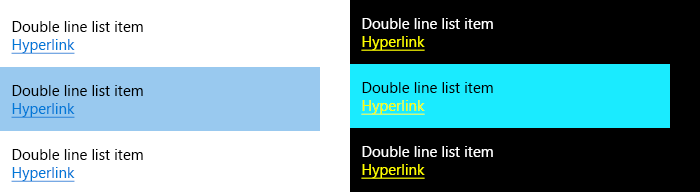
<style>
.page{position:relative;width:700px;height:192px;background:#000000}
.page>*{position:absolute;margin:0}
.t1{font:15px "SegoeUI";color:#000000}
.t2{font:15px "SegoeUI";color:#0078d7;text-decoration:underline}
.t3{font:15px "SegoeUI";color:#ffffff}
.t4{font:15px "SegoeUI";color:#ffff00;text-decoration:underline}
.t5{font:15px "SegoeUI";color:#010101}
</style>
<div class="page">
<p class="t1" style="left:11px;top:21px;width:132px;height:33px">Double line list item<br><span class="t2">Hyperlink</span></p>
<p class="t3" style="left:361px;top:18px;width:132px;height:33px">Double line list item<br><span class="t4">Hyperlink</span></p>
<p class="t1" style="left:11px;top:85px;width:132px;height:33px">Double line list item<br><span class="t2">Hyperlink</span></p>
<p class="t5" style="left:361px;top:82px;width:132px;height:33px">Double line list item<br><span class="t4">Hyperlink</span></p>
<p class="t1" style="left:11px;top:149px;width:132px;height:33px">Double line list item<br><span class="t2">Hyperlink</span></p>
<p class="t3" style="left:361px;top:146px;width:132px;height:33px">Double line list item<br><span class="t4">Hyperlink</span></p>
</div>
